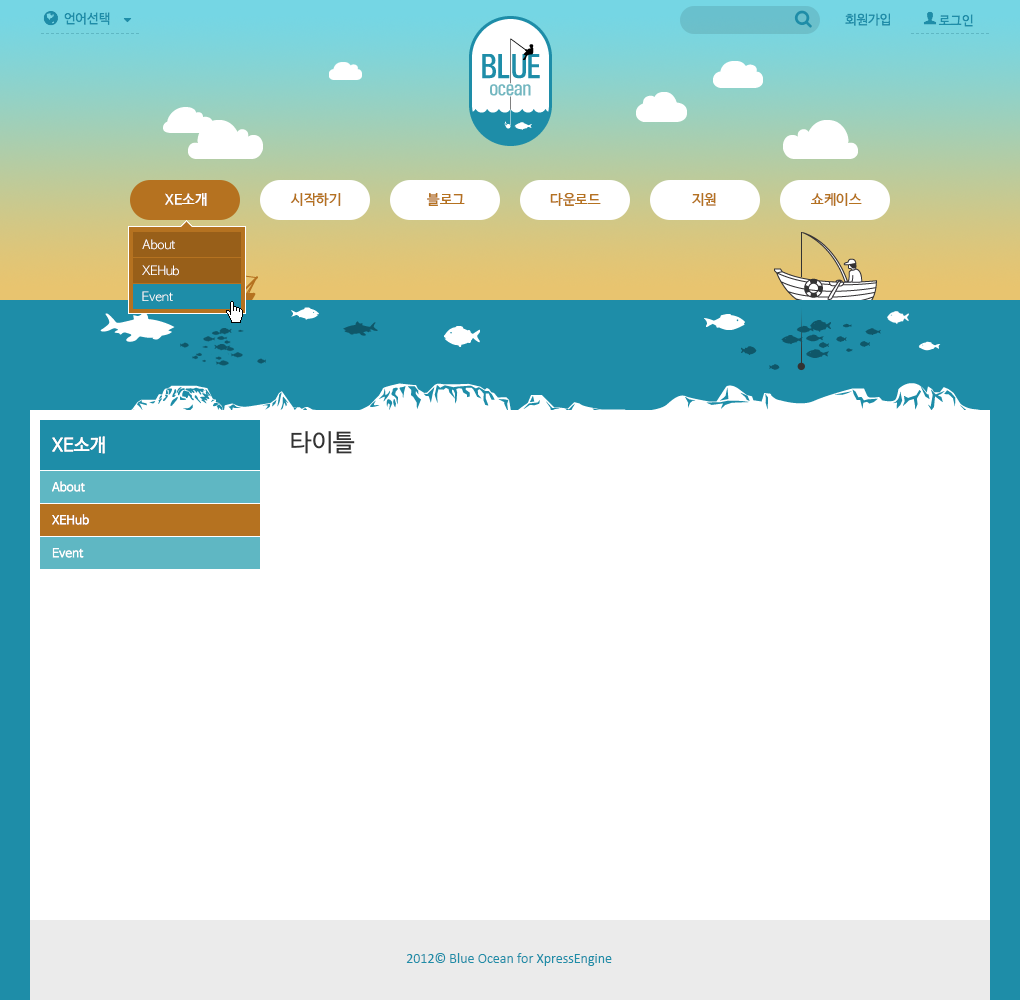
<style>
.page{position:relative;width:1020px;height:1000px;background:#ffffff}
.page>*{position:absolute;margin:0}
.t1{font:13px "NanumBarunGothicOTF";color:#1e8da8}
.t2{font:14px "NanumBarunGothicOTF";color:#ffffff}
.t3{font:14px "NanumBarunGothicOTF";color:#b57220}
.t4{font:12px/26px "AppleGothic";color:#ffffff}
.t5{font:18px "NanumBarunGothicOTF";color:#ffffff}
.t6{font:24px "NanumBarunGothicOTF";color:#333333}
.t7{font:12px/33px "NanumBarunGothicOTF";color:#ffffff}
.t8{font:14px "Calibri";color:#1e8da8}
</style>
<div class="page">
<p class="t1" style="left:64px;top:12px;width:46px;height:13px">언어선택</p>
<p class="t1" style="left:845px;top:13px;width:45px;height:13px">회원가입</p>
<p class="t2" style="left:165px;top:193px;width:42px;height:13px">XE소개</p>
<p class="t3" style="left:290px;top:193px;width:51px;height:13px">시작하기</p>
<p class="t3" style="left:427px;top:193px;width:38px;height:13px">블로그</p>
<p class="t3" style="left:550px;top:193px;width:51px;height:13px">다운로드</p>
<p class="t3" style="left:692px;top:193px;width:24px;height:13px">지원</p>
<p class="t3" style="left:811px;top:193px;width:51px;height:13px">쇼케이스</p>
<p class="t4" style="left:142px;top:239px;width:37px;height:63px">About<br>XEHub<br>Event</p>
<p class="t5" style="left:52px;top:436px;width:53px;height:18px">XE소개</p>
<p class="t6" style="left:291px;top:431px;width:64px;height:23px">타이틀</p>
<p class="t7" style="left:52px;top:481px;width:37px;height:77px">About<br>XEHub<br>Event</p>
<p class="t8" style="left:406px;top:953px;width:206px;height:13px">2012© Blue Ocean for XpressEngine</p>
</div>
